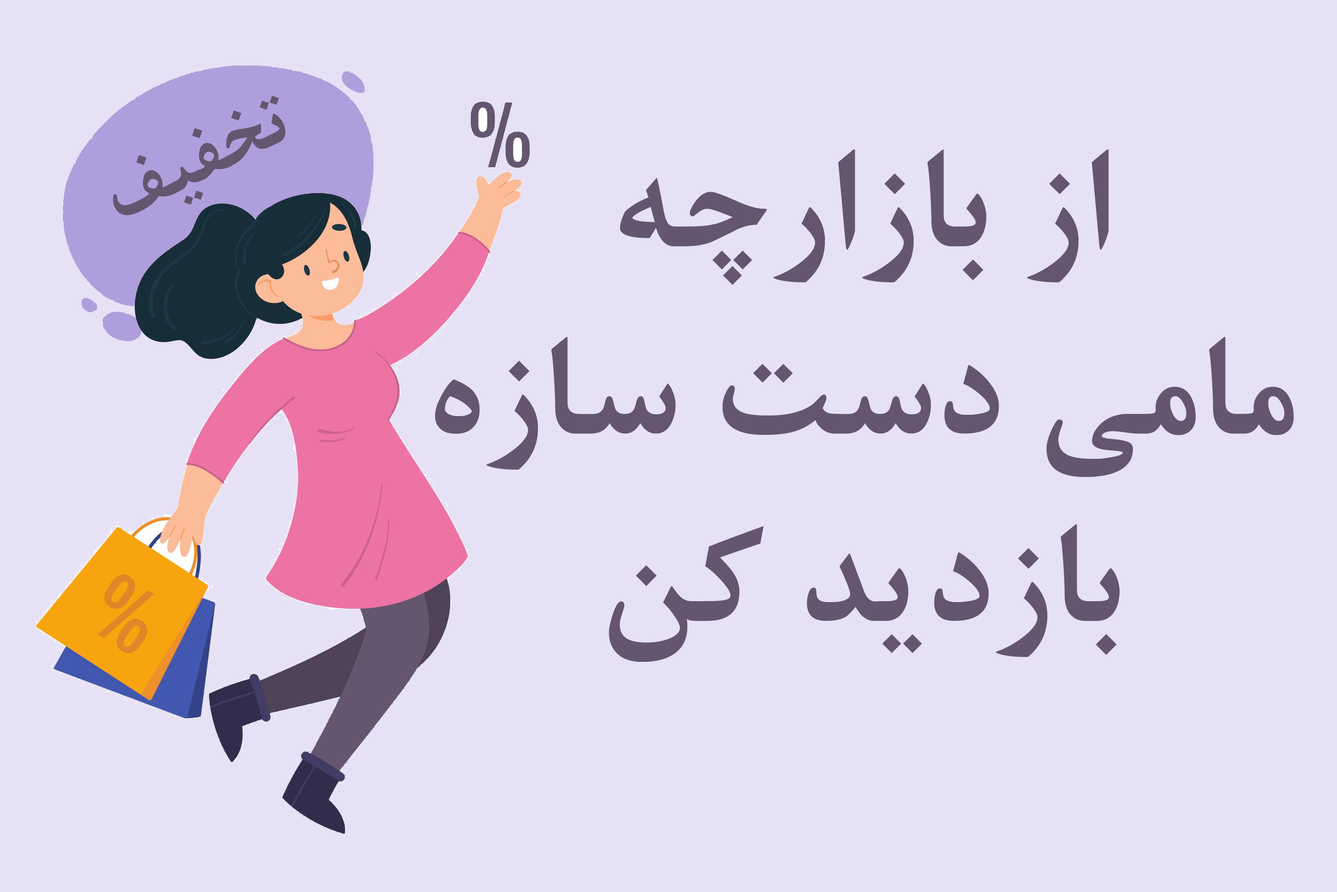
<style>
.page{position:relative;width:1337px;height:892px;background:#e6e1f5}
.page>*{position:absolute;margin:0}
.t1{font:83.6px "BNazaninBold";color:#64566f}
.t2{font:156px "BNazaninBold";color:#64566f}
</style>
<div class="page">
<p class="t1" style="left:113px;top:95px;width:173px;height:120px;rotate:-26deg">تخفیف</p>
<p class="t2" style="left:435px;top:149px;width:859px;height:513px;text-align:center">از بازارچه<br>مامی دست سازه<br>بازدید کن</p>
</div>
